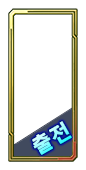
<style>
.page{position:relative;width:86px;height:170px;background:#ffffff}
.page>*{position:absolute;margin:0}
.t1{font:20.3px "MalgunGothicBold";font-weight:bold}
</style>
<div class="page">
<p class="t1" style="left:32px;top:121px;width:40px;height:34px;rotate:-30deg">출전</p>
</div>
